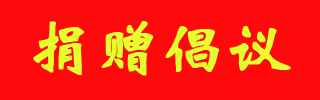
<style>
.page{position:relative;width:320px;height:100px;background:#ff0a0c}
.page>*{position:absolute;margin:0}
.t1{font:64.6px "STXinwei";color:#e5ff2c;font-weight:bold}
</style>
<div class="page">
<p class="t1" style="left:33px;top:21px;width:258px;height:55px">捐赠倡议</p>
</div>
